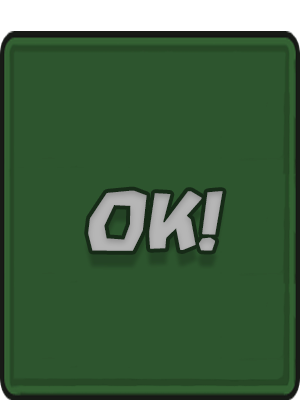
<style>
.page{position:relative;width:300px;height:400px;background:#2d552e}
.page>*{position:absolute;margin:0}
.t1{font:83.3px "Boulder";letter-spacing:-0.025em;color:#b6b6b6;font-weight:bold;font-style:italic}
</style>
<div class="page">
<p class="t1" style="left:88px;top:190px;width:135px;height:61px">OK!</p>
</div>
